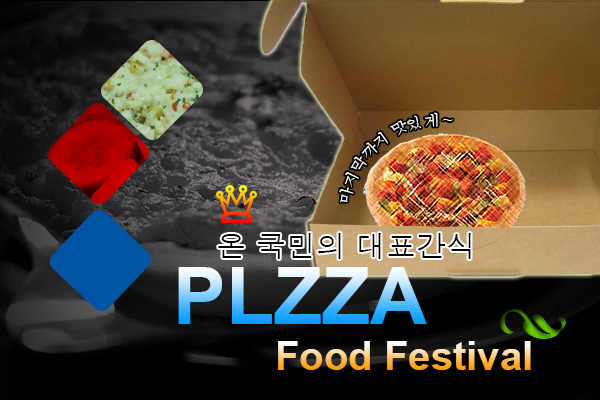
<style>
.page{position:relative;width:600px;height:400px}
.page>*{position:absolute;margin:0}
.t1{font:14.1px "Batang";color:#ffffff}
.t2{font:29.7px "Dotum";color:#000000}
.t3{font:78.6px "Arial-BoldMT"}
.t4{font:39.7px "Arial-BoldMT"}
</style>
<div class="page">
<p class="t1" style="left:339px;top:112px;width:114px;height:91px;rotate:-37deg">마지막까지 맛있게~</p>
<p class="t2" style="left:218px;top:233px;width:253px;height:26px">온 국민의 대표간식</p>
<p class="t3" style="left:178px;top:267px;width:249px;height:57px">PLZZA</p>
<p class="t4" style="left:278px;top:341px;width:253px;height:29px">Food Festival</p>
</div>
